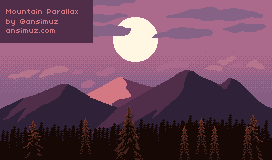
<style>
.page{position:relative;width:272px;height:160px;background:#ab6a8c}
.page>*{position:absolute;margin:0}
.t1{font:8.1px "04b03";color:#d47984}
</style>
<div class="page">
<p class="t1" style="left:6px;top:9px;width:72px;height:24px">Mountain Parallax<br>by @ansimuz<br>ansimuz.com</p>
</div>
